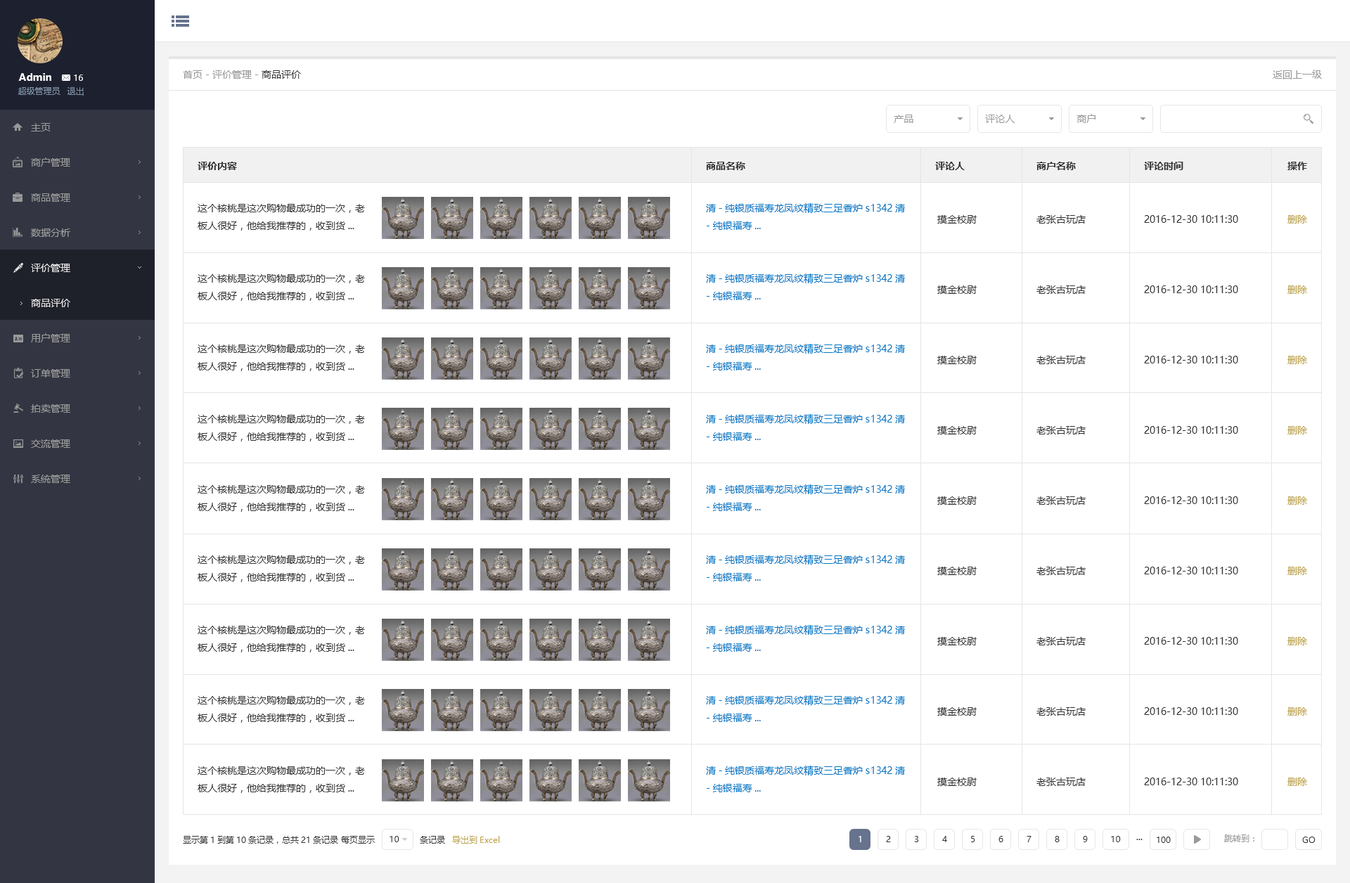
<style>
.page{position:relative;width:1350px;height:883px;background:#ffffff}
.page>*{position:absolute;margin:0}
.t1{font:9.8px "MicrosoftYaHei-Bold";color:#ffffff}
.t2{font:8.4px "MicrosoftYaHei";color:#ffffff}
.t3{font:9.8px "MicrosoftYaHei";color:#999999}
.t4{font:9.8px "MicrosoftYaHei";color:#333333}
.t5{font:8.4px "MicrosoftYaHei";color:#8095a8}
.t6{font:9.8px/35.2px "MicrosoftYaHei";color:#999999}
.t7{font:9.8px/35.2px "MicrosoftYaHei";color:#e6e6e6}
.t8{font:9.8px "MicrosoftYaHei-Bold";color:#333333}
.t9{font:9.8px/17.6px "MicrosoftYaHei";color:#333333}
.t10{font:9.8px/17.6px "MicrosoftYaHei";color:#0579c6}
.t11{font:9.8px/70.3px "MicrosoftYaHei";color:#333333}
.t12{font:9.8px/70.3px "MicrosoftYaHei";color:#bda34a}
.t13{font:9.8px "MicrosoftYaHei";color:#e6e6e6}
.t14{font:8.4px "MicrosoftYaHei";color:#333333}
.t15{font:8.4px "MicrosoftYaHei";color:#bda34a}
.t16{font:8.4px "MicrosoftYaHei";color:#999999}
</style>
<div class="page">
<p class="t1" style="left:18px;top:73px;width:33px;height:8px">Admin</p>
<p class="t2" style="left:74px;top:75px;width:9px;height:6px">16</p>
<p class="t3" style="left:183px;top:70px;width:118px;height:9px">首页 - 评价管理 - <span class="t4">商品评价</span></p>
<p class="t3" style="left:1273px;top:70px;width:49px;height:9px">返回上一级</p>
<p class="t5" style="left:18px;top:87px;width:42px;height:8px">超级管理员</p>
<p class="t5" style="left:67px;top:87px;width:17px;height:9px">退出</p>
<p class="t3" style="left:1077px;top:114px;width:19px;height:9px">商户</p>
<p class="t6" style="left:31px;top:123px;width:39px;height:360px">主页<br>商户管理<br>商品管理<br>数据分析<br><span class="t7">评价管理<br></span><br>用户管理<br>订单管理<br>拍卖管理<br>交流管理<br>系统管理</p>
<p class="t3" style="left:894px;top:115px;width:19px;height:8px">产品</p>
<p class="t3" style="left:985px;top:115px;width:30px;height:8px">评论人</p>
<p class="t8" style="left:198px;top:162px;width:39px;height:8px">评价内容</p>
<p class="t8" style="left:706px;top:162px;width:39px;height:8px">商品名称</p>
<p class="t8" style="left:935px;top:162px;width:30px;height:8px">评论人</p>
<p class="t8" style="left:1036px;top:162px;width:40px;height:8px">商户名称</p>
<p class="t8" style="left:1144px;top:162px;width:39px;height:8px">评论时间</p>
<p class="t8" style="left:1288px;top:162px;width:19px;height:8px">操作</p>
<p class="t9" style="left:198px;top:204px;width:167px;height:589px">这个核桃是这次购物最成功的一次，老<br>板人很好，他给我推荐的，收到货...<br><br><br>这个核桃是这次购物最成功的一次，老<br>板人很好，他给我推荐的，收到货...<br><br><br>这个核桃是这次购物最成功的一次，老<br>板人很好，他给我推荐的，收到货...<br><br><br>这个核桃是这次购物最成功的一次，老<br>板人很好，他给我推荐的，收到货...<br><br><br>这个核桃是这次购物最成功的一次，老<br>板人很好，他给我推荐的，收到货...<br><br><br>这个核桃是这次购物最成功的一次，老<br>板人很好，他给我推荐的，收到货...<br><br><br>这个核桃是这次购物最成功的一次，老<br>板人很好，他给我推荐的，收到货...<br><br><br>这个核桃是这次购物最成功的一次，老<br>板人很好，他给我推荐的，收到货...<br><br><br>这个核桃是这次购物最成功的一次，老<br>板人很好，他给我推荐的，收到货...</p>
<p class="t10" style="left:706px;top:203px;width:199px;height:589px">清-纯银质福寿龙凤纹精致三足香炉s1342清<br>-纯银福寿...<br><br><br>清-纯银质福寿龙凤纹精致三足香炉s1342清<br>-纯银福寿...<br><br><br>清-纯银质福寿龙凤纹精致三足香炉s1342清<br>-纯银福寿...<br><br><br>清-纯银质福寿龙凤纹精致三足香炉s1342清<br>-纯银福寿...<br><br><br>清-纯银质福寿龙凤纹精致三足香炉s1342清<br>-纯银福寿...<br><br><br>清-纯银质福寿龙凤纹精致三足香炉s1342清<br>-纯银福寿...<br><br><br>清-纯银质福寿龙凤纹精致三足香炉s1342清<br>-纯银福寿...<br><br><br>清-纯银质福寿龙凤纹精致三足香炉s1342清<br>-纯银福寿...<br><br><br>清-纯银质福寿龙凤纹精致三足香炉s1342清<br>-纯银福寿...</p>
<p class="t11" style="left:937px;top:215px;width:40px;height:571px">摸金校尉<br>摸金校尉<br>摸金校尉<br>摸金校尉<br>摸金校尉<br>摸金校尉<br>摸金校尉<br>摸金校尉<br>摸金校尉</p>
<p class="t11" style="left:1036px;top:215px;width:50px;height:571px">老张古玩店<br>老张古玩店<br>老张古玩店<br>老张古玩店<br>老张古玩店<br>老张古玩店<br>老张古玩店<br>老张古玩店<br>老张古玩店</p>
<p class="t11" style="left:1144px;top:215px;width:94px;height:570px">2016-12-30 10:11:30<br>2016-12-30 10:11:30<br>2016-12-30 10:11:30<br>2016-12-30 10:11:30<br>2016-12-30 10:11:30<br>2016-12-30 10:11:30<br>2016-12-30 10:11:30<br>2016-12-30 10:11:30<br>2016-12-30 10:11:30</p>
<p class="t12" style="left:1288px;top:215px;width:19px;height:571px">删除<br>删除<br>删除<br>删除<br>删除<br>删除<br>删除<br>删除<br>删除</p>
<p class="t13" style="left:31px;top:299px;width:39px;height:8px">商品评价</p>
<p class="t14" style="left:183px;top:836px;width:262px;height:8px">显示第1到第10条记录，总共21条记录 每页显示                条记录</p>
<p class="t14" style="left:390px;top:836px;width:9px;height:6px">10</p>
<p class="t15" style="left:452px;top:836px;width:48px;height:9px">导出到Excel</p>
<p class="t2" style="left:859px;top:836px;width:2px;height:6px">1</p>
<p class="t14" style="left:886px;top:836px;width:5px;height:6px">2</p>
<p class="t14" style="left:914px;top:836px;width:5px;height:6px">3</p>
<p class="t14" style="left:942px;top:836px;width:5px;height:6px">4</p>
<p class="t14" style="left:971px;top:836px;width:4px;height:6px">5</p>
<p class="t14" style="left:999px;top:836px;width:4px;height:6px">6</p>
<p class="t14" style="left:1027px;top:836px;width:5px;height:6px">7</p>
<p class="t14" style="left:1055px;top:836px;width:5px;height:6px">8</p>
<p class="t14" style="left:1083px;top:836px;width:5px;height:6px">9</p>
<p class="t14" style="left:1111px;top:836px;width:10px;height:6px">10</p>
<p class="t14" style="left:1136px;top:839px;width:7px;height:1px">...</p>
<p class="t14" style="left:1157px;top:837px;width:14px;height:6px">100</p>
<p class="t16" style="left:1224px;top:835px;width:30px;height:7px">跳转到：</p>
<p class="t14" style="left:1302px;top:837px;width:14px;height:6px">GO</p>
</div>
